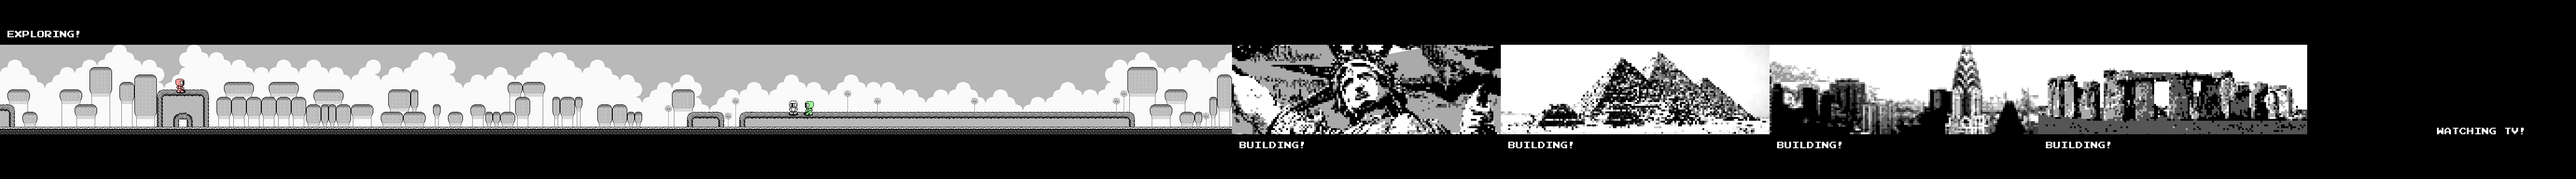
<style>
.page{position:relative;width:2576px;height:179px;background:#000000}
.page>*{position:absolute;margin:0}
.t1{font:7.5px "PressStart2P";color:#ffffff}
</style>
<div class="page">
<p class="t1" style="left:7px;top:31px;width:72px;height:6px">EXPLORING!</p>
<p class="t1" style="left:2437px;top:128px;width:87px;height:6px">WATCHING TV!</p>
<p class="t1" style="left:1239px;top:142px;width:65px;height:6px">BUILDING!</p>
<p class="t1" style="left:1508px;top:142px;width:65px;height:6px">BUILDING!</p>
<p class="t1" style="left:1777px;top:142px;width:64px;height:6px">BUILDING!</p>
<p class="t1" style="left:2046px;top:142px;width:64px;height:6px">BUILDING!</p>
</div>
